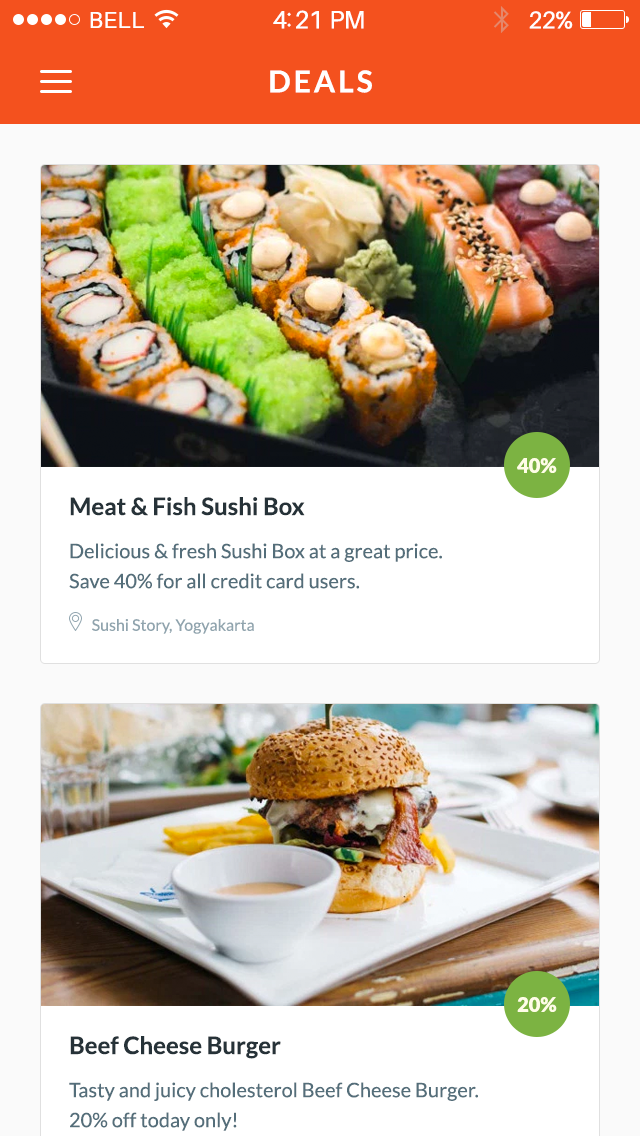
<style>
.page{position:relative;width:640px;height:1136px;background:#ffffff}
.page>*{position:absolute;margin:0}
.t1{font:23px "Aileron-Regular";letter-spacing:0.02em;color:#ffffff}
.t2{font:25px "Aileron-Regular";letter-spacing:-0.02em;color:#ffffff}
.t3{font:24px "Aileron-Regular";letter-spacing:-0.02em;color:#ffffff}
.t4{font:30px "Lato-Bold";letter-spacing:0.1em;color:#ffffff;text-transform:uppercase}
.t5{font:20px "Lato-Black";color:#fffde7}
.t6{font:24px "Lato-Bold";color:#263238}
.t7{font:20px/30px "Lato-Regular";color:#546e7a}
.t8{font:16px "Lato-Regular";color:#90a4ae}
</style>
<div class="page">
<p class="t1" style="left:90px;top:12px;width:54px;height:16px">BELL</p>
<p class="t2" style="left:273px;top:10px;width:91px;height:19px">4:21 PM</p>
<p class="t3" style="left:529px;top:11px;width:44px;height:18px">22%</p>
<p class="t4" style="left:270px;top:70px;width:102px;height:23px">Deals</p>
<p class="t5" style="left:517px;top:458px;width:40px;height:15px">40%</p>
<p class="t6" style="left:70px;top:497px;width:235px;height:19px">Meat &amp; Fish Sushi Box</p>
<p class="t7" style="left:69px;top:543px;width:373px;height:46px">Delicious &amp; fresh Sushi Box at a great price.<br>Save 40% for all credit card users.</p>
<p class="t8" style="left:92px;top:619px;width:162px;height:15px">Sushi Story, Yogyakarta</p>
<p class="t5" style="left:517px;top:997px;width:40px;height:15px">20%</p>
<p class="t6" style="left:70px;top:1036px;width:211px;height:23px">Beef Cheese Burger</p>
<p class="t7" style="left:69px;top:1082px;width:409px;height:49px">Tasty and juicy cholesterol Beef Cheese Burger.<br>20% off today only!</p>
</div>
